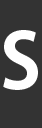
<style>
.page{position:relative;width:42px;height:128px;background:#333333}
.page>*{position:absolute;margin:0}
.t1{font:75px "AdobeGothicStd-Bold";color:#ffffff}
</style>
<div class="page">
<p class="t1" style="left:3px;top:30px;width:35px;height:60px">S</p>
</div>
